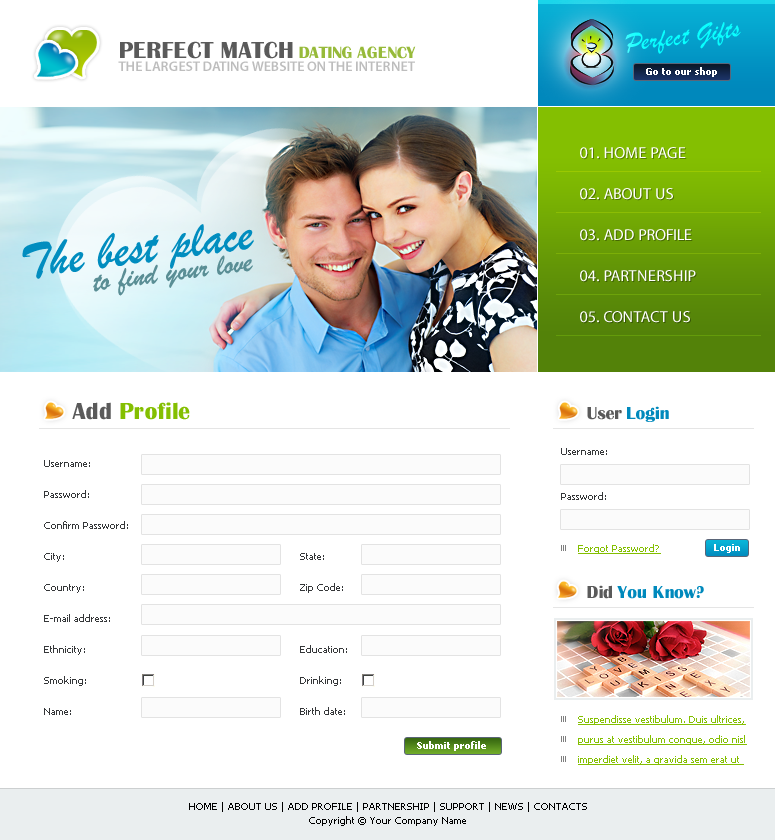
<style>
.page{position:relative;width:775px;height:840px;background:#ffffff}
.page>*{position:absolute;margin:0}
.t1{font:27px "BrushScriptMT";color:#0affff}
.t2{font:24px "BritannicBold";color:#5a5a5a;text-transform:uppercase}
.t3{font:17px "BritannicBold";color:#97ba3a;text-transform:uppercase}
.t4{font:14px "MyriadPro-Semibold";color:#bdbdbd;text-transform:uppercase}
.t5{font:10px "Tahoma-Bold";color:#ffffff}
.t6{font:16px "MyriadPro-Regular";color:#ffffff;text-transform:uppercase}
.t7{font:51px "BrushScriptMT";color:#018dbf}
.t8{font:31px "BrushScriptMT";color:#5a8e95}
.t9{font:24px "BritannicBold";color:#84bf01}
.t10{font:24px "BritannicBold";color:#5a5a5a}
.t11{font:18px "BritannicBold";color:#0089bc}
.t12{font:18px "BritannicBold";color:#5a5a5a}
.t13{font:10px "Tahoma";color:#353739}
.t14{font:10px "Tahoma";color:#84bf01;text-decoration:underline}
.t15{font:10px/20px "Tahoma";color:#84bf01;text-decoration:underline}
.t16{font:10px/14px "Tahoma";color:#000000}
</style>
<div class="page">
<p class="t1" style="left:625px;top:22px;width:116px;height:32px;rotate:-7deg">Perfect Gifts</p>
<p class="t2" style="left:120px;top:41px;width:173px;height:18px">perfect match</p>
<p class="t3" style="left:299px;top:46px;width:117px;height:13px">DATING AGENCY</p>
<p class="t4" style="left:118px;top:61px;width:297px;height:10px">THE LARGEST DATING WEBSITE ON THE INTERNET</p>
<p class="t5" style="left:646px;top:67px;width:71px;height:10px">Go to our shop</p>
<p class="t6" style="left:580px;top:147px;width:106px;height:12px">01. HOME PAGE</p>
<p class="t6" style="left:580px;top:188px;width:93px;height:12px">02. ABOUT US</p>
<p class="t7" style="left:22px;top:224px;width:232px;height:55px;rotate:-7deg">The best place</p>
<p class="t6" style="left:580px;top:229px;width:112px;height:12px">03. ADD PROFILE</p>
<p class="t8" style="left:93px;top:255px;width:160px;height:41px;rotate:-7deg">to find your love</p>
<p class="t6" style="left:580px;top:270px;width:116px;height:12px">04. PARTNERSHIP</p>
<p class="t6" style="left:580px;top:311px;width:110px;height:12px">05. CONTACT US</p>
<p class="t9" style="left:72px;top:402px;width:118px;height:18px"><span class="t10">Add </span>Profile</p>
<p class="t11" style="left:587px;top:406px;width:82px;height:16px"><span class="t12">User </span>Login</p>
<p class="t13" style="left:561px;top:448px;width:46px;height:7px">Username:</p>
<p class="t13" style="left:44px;top:460px;width:46px;height:7px">Username:</p>
<p class="t13" style="left:44px;top:490px;width:45px;height:8px">Password:</p>
<p class="t13" style="left:561px;top:492px;width:45px;height:8px">Password:</p>
<p class="t13" style="left:44px;top:521px;width:84px;height:8px">Confirm Password:</p>
<p class="t14" style="left:578px;top:544px;width:83px;height:10px">Forgot Password?</p>
<p class="t5" style="left:714px;top:544px;width:26px;height:9px">Login</p>
<p class="t13" style="left:44px;top:553px;width:20px;height:9px">City:</p>
<p class="t13" style="left:300px;top:553px;width:24px;height:7px">State:</p>
<p class="t13" style="left:44px;top:584px;width:40px;height:9px">Country:</p>
<p class="t13" style="left:300px;top:583px;width:43px;height:10px">Zip Code:</p>
<p class="t11" style="left:587px;top:585px;width:117px;height:14px"><span class="t12">Did </span>You Know?</p>
<p class="t13" style="left:44px;top:614px;width:66px;height:8px">E-mail address:</p>
<p class="t13" style="left:44px;top:645px;width:41px;height:10px">Ethnicity:</p>
<p class="t13" style="left:300px;top:645px;width:47px;height:8px">Education:</p>
<p class="t13" style="left:44px;top:676px;width:42px;height:10px">Smoking:</p>
<p class="t13" style="left:300px;top:676px;width:41px;height:10px">Drinking:</p>
<p class="t13" style="left:44px;top:708px;width:27px;height:7px">Name:</p>
<p class="t13" style="left:300px;top:707px;width:45px;height:8px">Birth date:</p>
<p class="t15" style="left:578px;top:715px;width:169px;height:50px">Suspendisse vestibulum. Duis ultrices, purus at vestibulum congue, odio nisl imperdiet velit, a gravida sem erat ut</p>
<p class="t5" style="left:417px;top:741px;width:69px;height:10px">Submit profile</p>
<p class="t16" style="left:189px;top:802px;width:398px;height:24px;text-align:center">HOME | ABOUT US | ADD PROFILE | PARTNERSHIP | SUPPORT | NEWS | CONTACTS<br>Copyright © Your Company Name</p>
</div>
